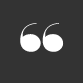
<style>
.page{position:relative;width:83px;height:83px;background:#333333}
.page>*{position:absolute;margin:0}
.t1{font:91px "Pistilli";letter-spacing:0.12em;color:#ffffff}
</style>
<div class="page">
<p class="t1" style="left:20px;top:23px;width:44px;height:29px">“</p>
</div>
